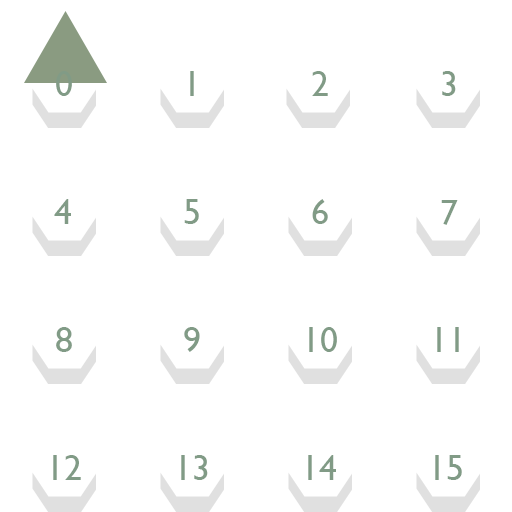
<style>
.page{position:relative;width:512px;height:512px;background:#ffffff}
.page>*{position:absolute;margin:0}
.t1{font:36px "GillSans";color:#819b86}
</style>
<div class="page">
<p class="t1" style="left:56px;top:71px;width:16px;height:25px">0</p>
<p class="t1" style="left:190px;top:71px;width:4px;height:25px">1</p>
<p class="t1" style="left:312px;top:71px;width:16px;height:25px">2</p>
<p class="t1" style="left:442px;top:71px;width:14px;height:25px">3</p>
<p class="t1" style="left:54px;top:199px;width:17px;height:25px">4</p>
<p class="t1" style="left:184px;top:199px;width:15px;height:25px">5</p>
<p class="t1" style="left:312px;top:199px;width:16px;height:25px">6</p>
<p class="t1" style="left:441px;top:200px;width:17px;height:25px">7</p>
<p class="t1" style="left:56px;top:327px;width:16px;height:25px">8</p>
<p class="t1" style="left:184px;top:327px;width:16px;height:25px">9</p>
<p class="t1" style="left:309px;top:327px;width:28px;height:25px">10</p>
<p class="t1" style="left:437px;top:327px;width:22px;height:25px">11</p>
<p class="t1" style="left:53px;top:455px;width:28px;height:25px">12</p>
<p class="t1" style="left:181px;top:455px;width:27px;height:25px">13</p>
<p class="t1" style="left:308px;top:455px;width:28px;height:25px">14</p>
<p class="t1" style="left:435px;top:455px;width:27px;height:25px">15</p>
</div>
